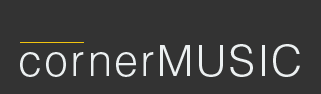
<style>
.page{position:relative;width:321px;height:94px;background:#333333}
.page>*{position:absolute;margin:0}
.t1{font:43.5px "HelveticaLTStd-Light";letter-spacing:0.05em;color:#ecf0f1}
</style>
<div class="page">
<p class="t1" style="left:20px;top:44px;width:280px;height:33px">cornerMUSIC</p>
</div>
